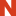
<style>
.page{position:relative;width:16px;height:16px;background:#d63c1d}
.page>*{position:absolute;margin:0}
.t1{font:24px "Arial-Black";color:#d63c1d}
</style>
<div class="page">
<p class="t1" style="left:0px;top:0px;width:17px;height:16px">N</p>
</div>
